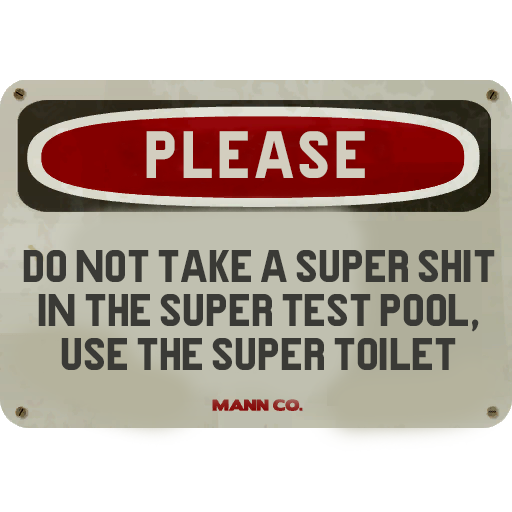
<style>
.page{position:relative;width:512px;height:512px;background:#ffffff}
.page>*{position:absolute;margin:0}
.t1{font:54px "PreussischeVI9";letter-spacing:0.06em;color:#d8d8c8}
.t2{font:37px "PreussischeVI9";color:#3a3a36}
</style>
<div class="page">
<p class="t1" style="left:146px;top:131px;width:219px;height:47px;opacity:0.93">PLEASE</p>
<p class="t2" style="left:23px;top:250px;width:472px;height:120px;text-align:center">DO NOT TAKE A SUPER SHIT<br>IN THE SUPER TEST POOL,<br>USE THE SUPER TOILET</p>
</div>
